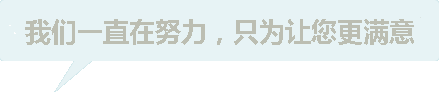
<style>
.page{position:relative;width:439px;height:92px;background:#e7f3f5}
.page>*{position:absolute;margin:0}
.t1{font:26px "MicrosoftYaHei-Bold";color:#bcbeb2}
</style>
<div class="page">
<p class="t1" style="left:25px;top:19px;width:389px;height:26px">我们一直在努力，只为让您更满意</p>
</div>
